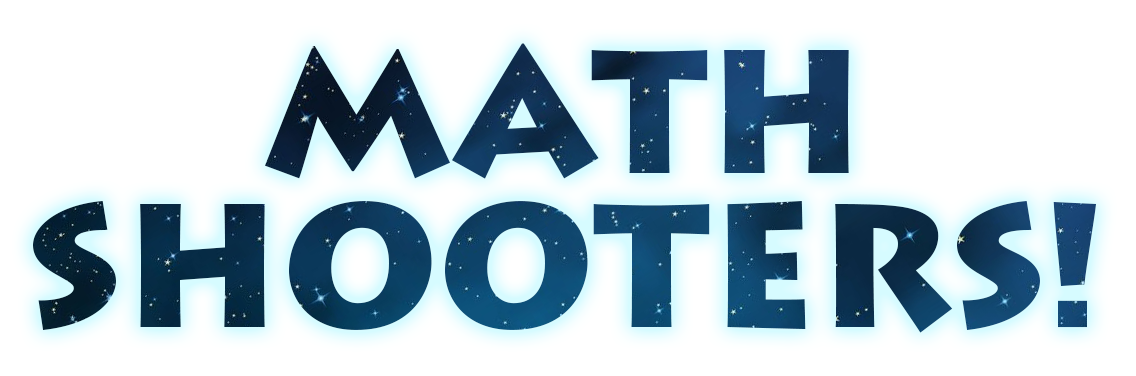
<style>
.page{position:relative;width:1136px;height:376px;background:#ffffff}
.page>*{position:absolute;margin:0}
.t1{font:173.4px/153.7px "LithosPro-Black"}
</style>
<div class="page">
<p class="t1" style="left:33px;top:43px;width:1063px;height:290px;text-align:center">MATH<br>SHOOTERS!</p>
</div>
